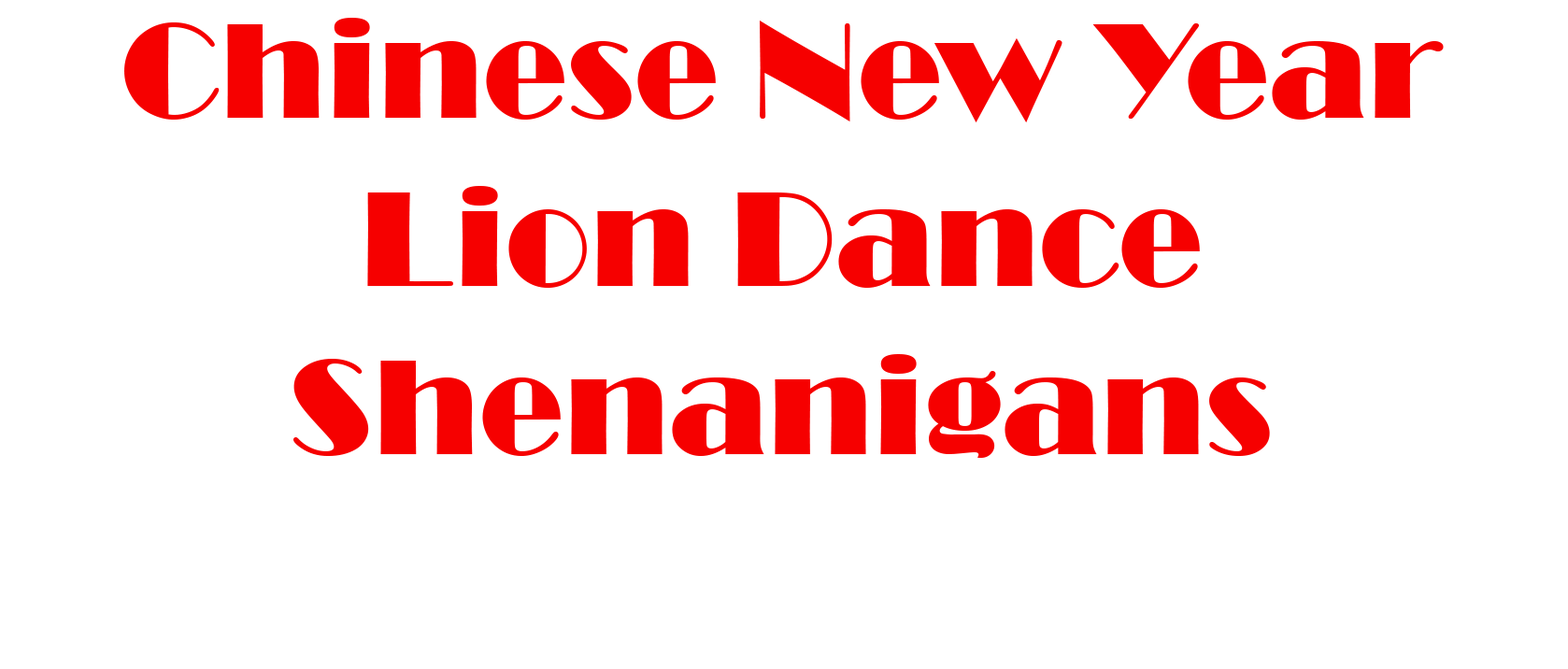
<style>
.page{position:relative;width:1568px;height:669px;background:#ffffff}
.page>*{position:absolute;margin:0}
.t1{font:140.2px "Broadway";color:#f60000}
</style>
<div class="page">
<p class="t1" style="left:124px;top:18px;width:1320px;height:440px;text-align:center">Chinese New Year <br>Lion Dance <br>Shenanigans</p>
</div>
